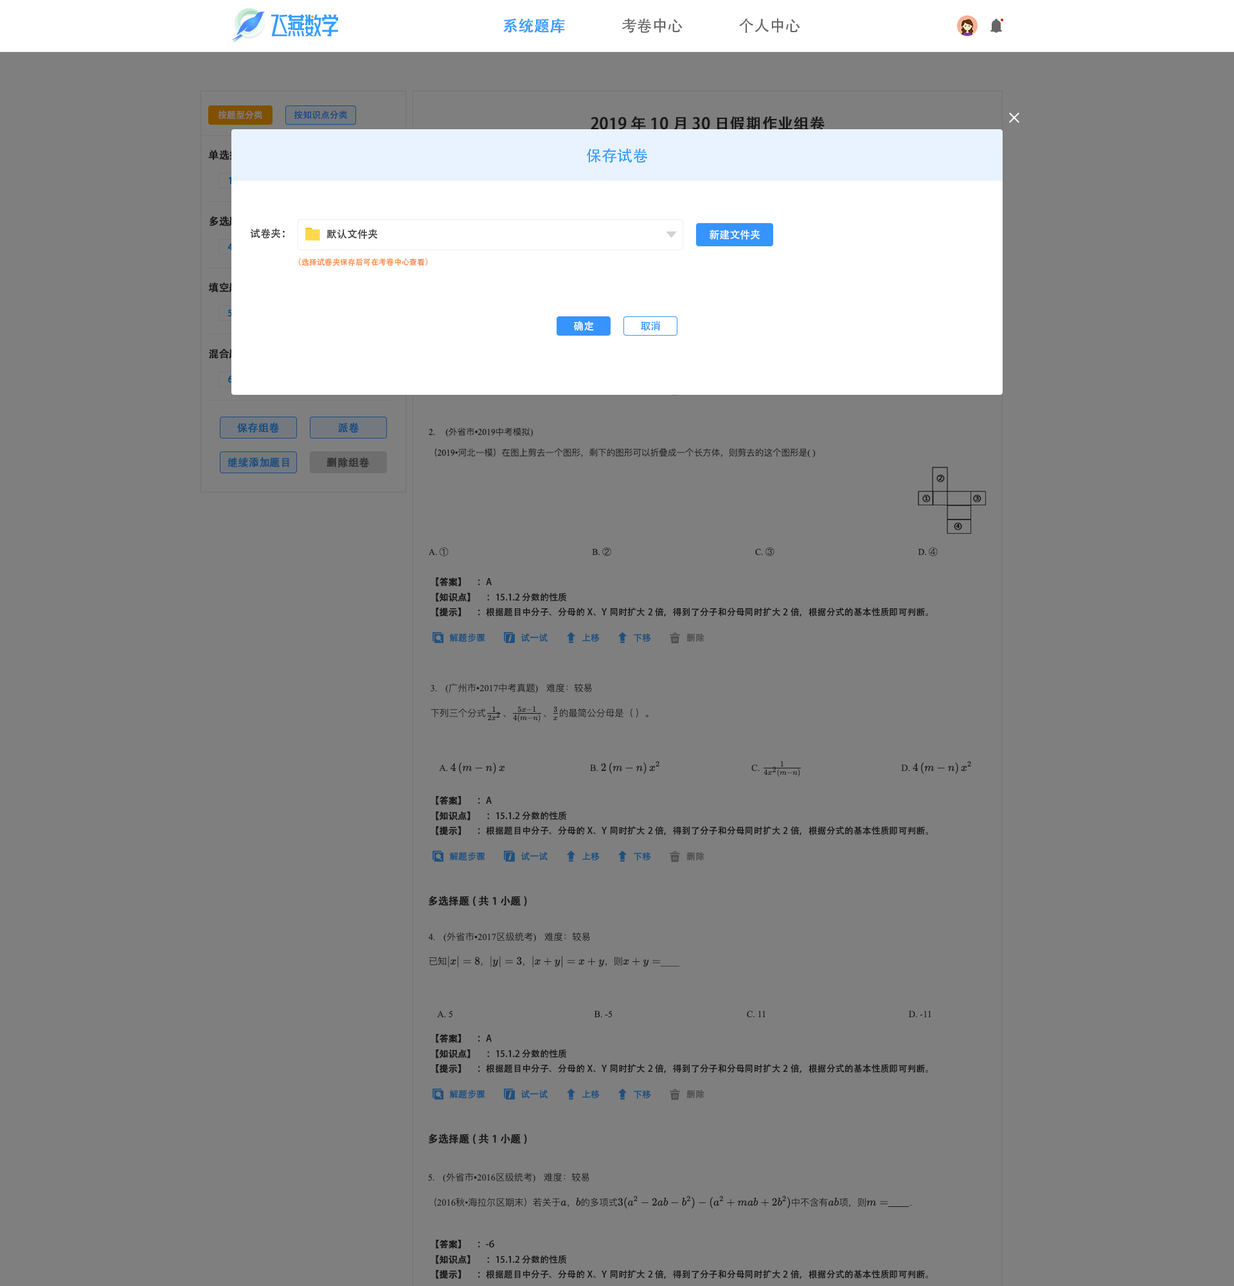
<style>
.page{position:relative;width:1234px;height:1286px;background:#7f7f7f}
.page>*{position:absolute;margin:0}
.t1{font:15.4px "AdobeHeitiStd-Regular";color:#409eff;font-weight:bold}
.t2{font:15.4px "AdobeHeitiStd-Regular";color:#666666}
.t3{font:9px "AdobeHeitiStd-Regular";color:#7f7f7f}
.t4{font:9px "AdobeHeitiStd-Regular";color:#1b4a7f}
.t5{font:15.4px "AdobeHeitiStd-Regular";color:#191919;font-weight:bold}
.t6{font:15.4px "AdobeHeitiStd-Regular";color:#339dff}
.t7{font:9px "AdobeHeitiStd-Regular";color:#024f7f;font-weight:bold}
.t8{font:10.3px "AdobeHeitiStd-Regular";color:#333333}
.t9{font:10.3px "AdobeHeitiStd-Regular";color:#feffff}
.t10{font:9px "AdobeHeitiStd-Regular";font-weight:bold}
.t11{font:7.7px "AdobeHeitiStd-Regular";color:#ff8941}
.t12{font:10.3px "AdobeHeitiStd-Regular";color:#ffffff}
.t13{font:10.3px "AdobeHeitiStd-Regular";color:#3794ff}
.t14{font:10.3px "AdobeHeitiStd-Regular";color:#194e7f;font-weight:bold}
.t15{font:10.3px "AdobeHeitiStd-Regular";color:#204f7f;font-weight:bold}
.t16{font:10.3px "AdobeHeitiStd-Regular";color:#333333;font-weight:bold}
.t17{font:9px "AdobeHeitiStd-Regular";color:#2e2e2e;font-weight:bold}
.t18{font:9px "AdobeHeitiStd-Regular";color:#2e2e2e}
.t19{font:9px "AdobeHeitiStd-Regular";color:#194e7f}
.t20{font:9px "AdobeHeitiStd-Regular";color:#4c4c4c}
.t21{font:10.3px "AdobeHeitiStd-Regular";color:#191919;font-weight:bold}
</style>
<div class="page">
<p class="t1" style="left:503px;top:19px;width:62px;height:14px">系统题库</p>
<p class="t2" style="left:622px;top:18px;width:61px;height:15px">考卷中心</p>
<p class="t2" style="left:739px;top:18px;width:61px;height:15px">个人中心</p>
<p class="t3" style="left:218px;top:110px;width:44px;height:10px">按题型分类</p>
<p class="t4" style="left:294px;top:110px;width:53px;height:10px">按知识点分类</p>
<p class="t5" style="left:591px;top:116px;width:234px;height:15px">2019年10月30日假期作业组卷</p>
<p class="t6" style="left:586px;top:148px;width:62px;height:15px">保存试卷</p>
<p class="t7" style="left:228px;top:177px;width:4px;height:7px">1</p>
<p class="t8" style="left:250px;top:228px;width:35px;height:11px">试卷夹：</p>
<p class="t8" style="left:327px;top:229px;width:50px;height:10px">默认文件夹</p>
<p class="t9" style="left:709px;top:230px;width:51px;height:10px">新建文件夹</p>
<p class="t10" style="left:228px;top:243px;width:5px;height:8px">4</p>
<p class="t11" style="left:299px;top:258px;width:129px;height:8px">（选择试卷夹保存后可在考卷中心查看）</p>
<p class="t7" style="left:228px;top:309px;width:5px;height:8px">5</p>
<p class="t12" style="left:573px;top:321px;width:21px;height:10px">确定</p>
<p class="t13" style="left:641px;top:321px;width:20px;height:10px">取消</p>
<p class="t10" style="left:228px;top:375px;width:5px;height:8px">6</p>
<p class="t14" style="left:237px;top:422px;width:43px;height:11px">保存组卷</p>
<p class="t14" style="left:338px;top:422px;width:21px;height:11px">派卷</p>
<p class="t15" style="left:228px;top:457px;width:61px;height:10px">继续添加题目</p>
<p class="t16" style="left:327px;top:457px;width:43px;height:10px">删除组卷</p>
<p class="t17" style="left:436px;top:577px;width:56px;height:9px">【答案】 <span class="t18">     ：A</span></p>
<p class="t18" style="left:436px;top:593px;width:131px;height:9px"><span class="t17">【知识点】 </span>     ：15.1.2 分数的性质</p>
<p class="t18" style="left:436px;top:607px;width:492px;height:9px"><span class="t17">【提示】 </span>     ：根据题目中分子、分母的X、Y同时扩大2倍，得到了分子和分母同时扩大2倍，根据分式的基本性质即可判断。</p>
<p class="t19" style="left:449px;top:633px;width:36px;height:9px">解题步骤</p>
<p class="t19" style="left:521px;top:633px;width:27px;height:9px">试一试</p>
<p class="t19" style="left:582px;top:633px;width:18px;height:9px">上移</p>
<p class="t19" style="left:634px;top:633px;width:17px;height:9px">下移</p>
<p class="t20" style="left:687px;top:633px;width:18px;height:9px">删除</p>
<p class="t17" style="left:436px;top:796px;width:56px;height:9px">【答案】 <span class="t18">     ：A</span></p>
<p class="t18" style="left:436px;top:811px;width:131px;height:9px"><span class="t17">【知识点】 </span>     ：15.1.2 分数的性质</p>
<p class="t18" style="left:436px;top:825px;width:492px;height:10px"><span class="t17">【提示】 </span>     ：根据题目中分子、分母的X、Y同时扩大2倍，得到了分子和分母同时扩大2倍，根据分式的基本性质即可判断。</p>
<p class="t19" style="left:449px;top:852px;width:36px;height:9px">解题步骤</p>
<p class="t19" style="left:521px;top:852px;width:27px;height:8px">试一试</p>
<p class="t19" style="left:582px;top:852px;width:18px;height:9px">上移</p>
<p class="t19" style="left:634px;top:852px;width:17px;height:9px">下移</p>
<p class="t20" style="left:687px;top:852px;width:18px;height:8px">删除</p>
<p class="t21" style="left:428px;top:896px;width:99px;height:10px">多选择题(共1小题)</p>
<p class="t17" style="left:436px;top:1034px;width:56px;height:9px">【答案】 <span class="t18">     ：A</span></p>
<p class="t18" style="left:436px;top:1049px;width:131px;height:9px"><span class="t17">【知识点】 </span>     ：15.1.2 分数的性质</p>
<p class="t18" style="left:436px;top:1063px;width:492px;height:10px"><span class="t17">【提示】 </span>     ：根据题目中分子、分母的X、Y同时扩大2倍，得到了分子和分母同时扩大2倍，根据分式的基本性质即可判断。</p>
<p class="t19" style="left:449px;top:1090px;width:36px;height:9px">解题步骤</p>
<p class="t19" style="left:521px;top:1090px;width:27px;height:8px">试一试</p>
<p class="t19" style="left:582px;top:1090px;width:18px;height:9px">上移</p>
<p class="t19" style="left:634px;top:1090px;width:17px;height:9px">下移</p>
<p class="t20" style="left:687px;top:1090px;width:18px;height:8px">删除</p>
<p class="t21" style="left:428px;top:1133px;width:99px;height:11px">多选择题(共1小题)</p>
<p class="t17" style="left:436px;top:1239px;width:58px;height:9px">【答案】 <span class="t18">     ：-6</span></p>
<p class="t18" style="left:436px;top:1255px;width:131px;height:9px"><span class="t17">【知识点】 </span>     ：15.1.2 分数的性质</p>
<p class="t18" style="left:436px;top:1269px;width:492px;height:10px"><span class="t17">【提示】 </span>     ：根据题目中分子、分母的X、Y同时扩大2倍，得到了分子和分母同时扩大2倍，根据分式的基本性质即可判断。</p>
</div>
